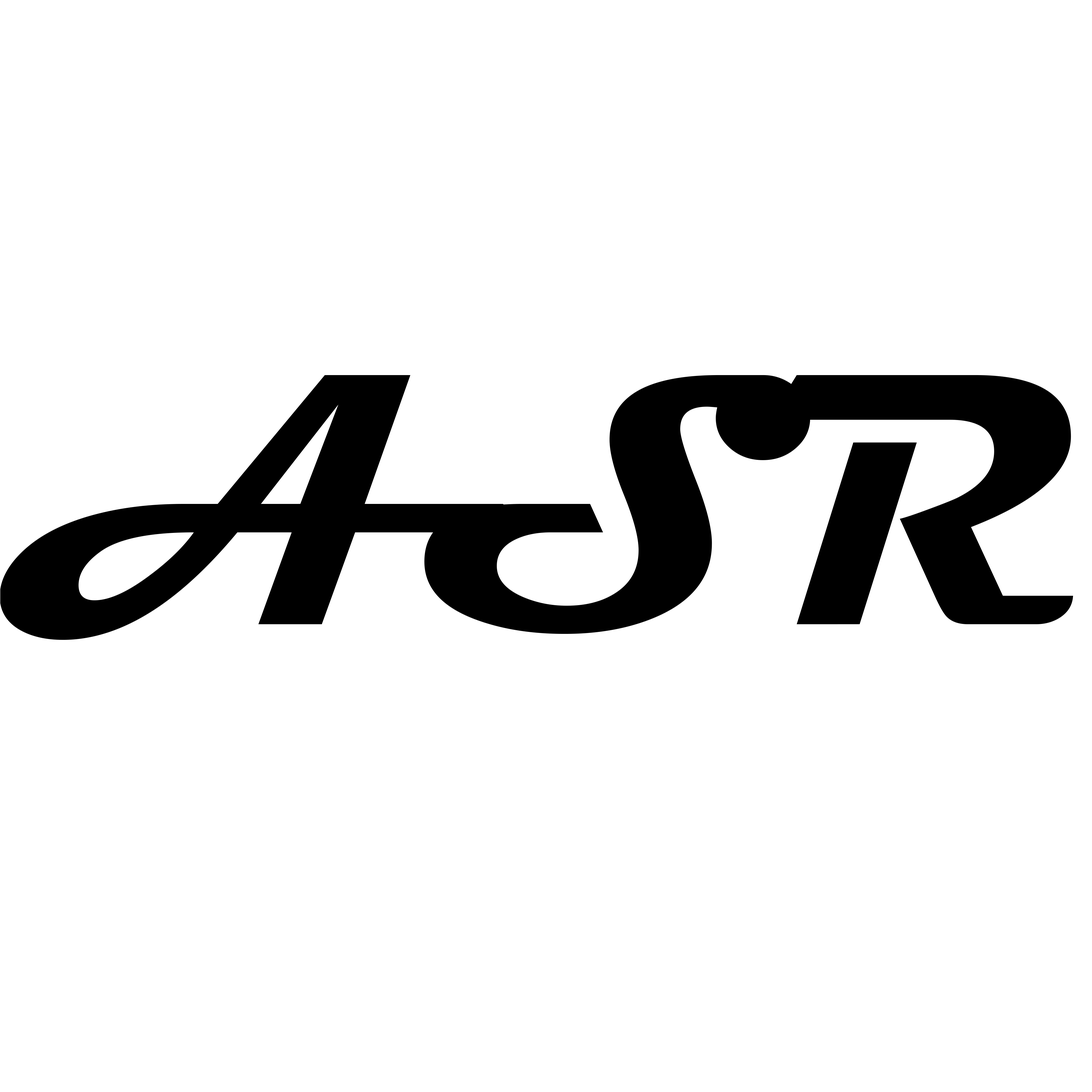
<style>
.page{position:relative;width:1092px;height:1092px;background:#ffffff}
.page>*{position:absolute;margin:0}
.t1{font:362.6px "Magneto-Bold";color:#000000}
</style>
<div class="page">
<p class="t1" style="left:0px;top:375px;width:1073px;height:265px">ASR</p>
</div>
